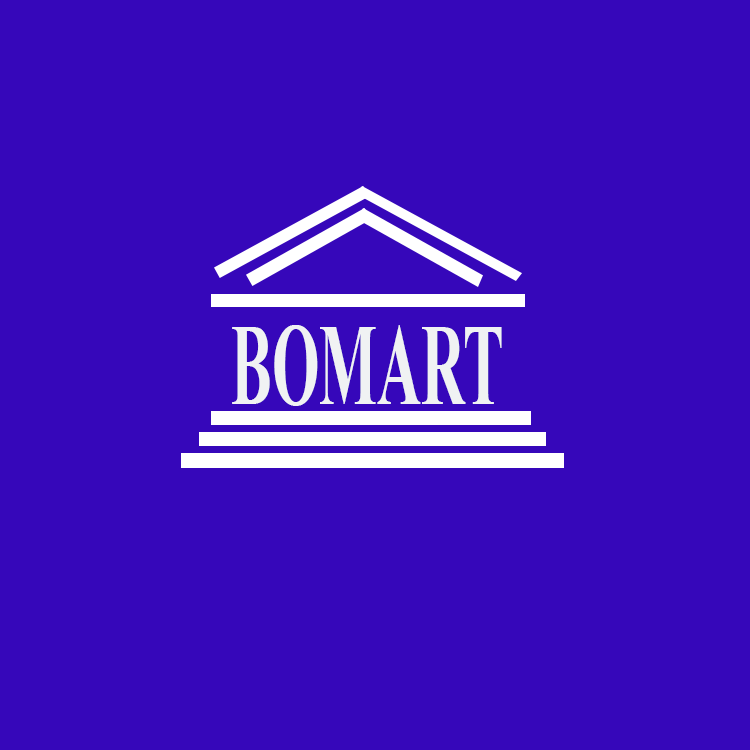
<style>
.page{position:relative;width:750px;height:750px;background:#3607ba}
.page>*{position:absolute;margin:0}
.t1{font:116.4px "TimesNewRomanPS-BoldMT";color:#f0f2f3;scale:0.53 1}
</style>
<div class="page">
<p class="t1" style="left:232px;top:325px;width:270px;height:81px">BOMART</p>
</div>
